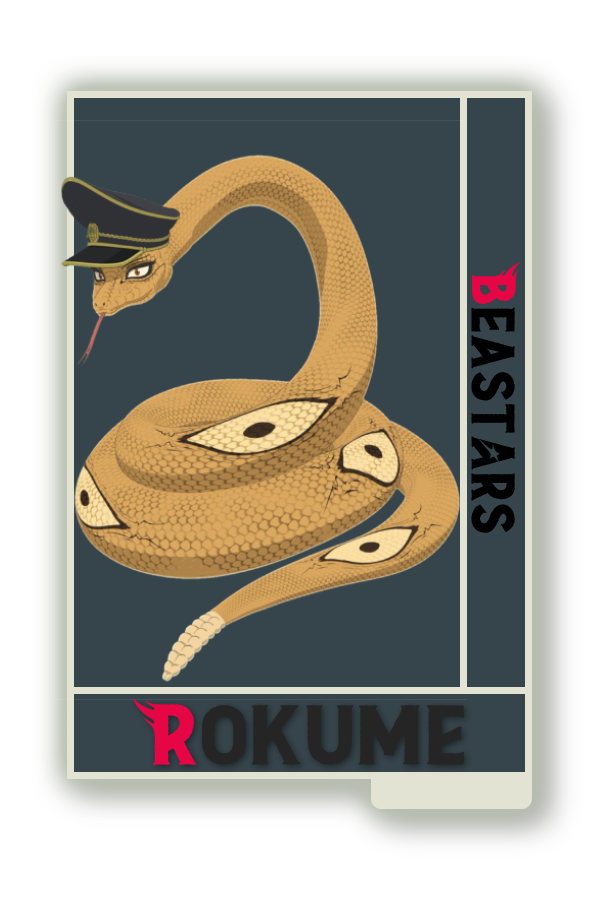
<style>
.page{position:relative;width:600px;height:900px;background:#36454b}
.page>*{position:absolute;margin:0}
.t1{font:48.8px "BEAST";color:#000000}
.t2{font:48.8px "BEAST";color:#e60646}
.t3{font:67px "BEAST";color:#252525;scale:1.12 1}
.t4{font:67px "BEAST";color:#e60646;scale:1.12 1}
</style>
<div class="page">
<p class="t1" style="left:471px;top:262px;width:50px;height:271px;rotate:90deg"><span class="t2">B</span>east@rs</p>
<p class="t3" style="left:133px;top:698px;width:332px;height:67px"><span class="t4">R</span>okume</p>
</div>
